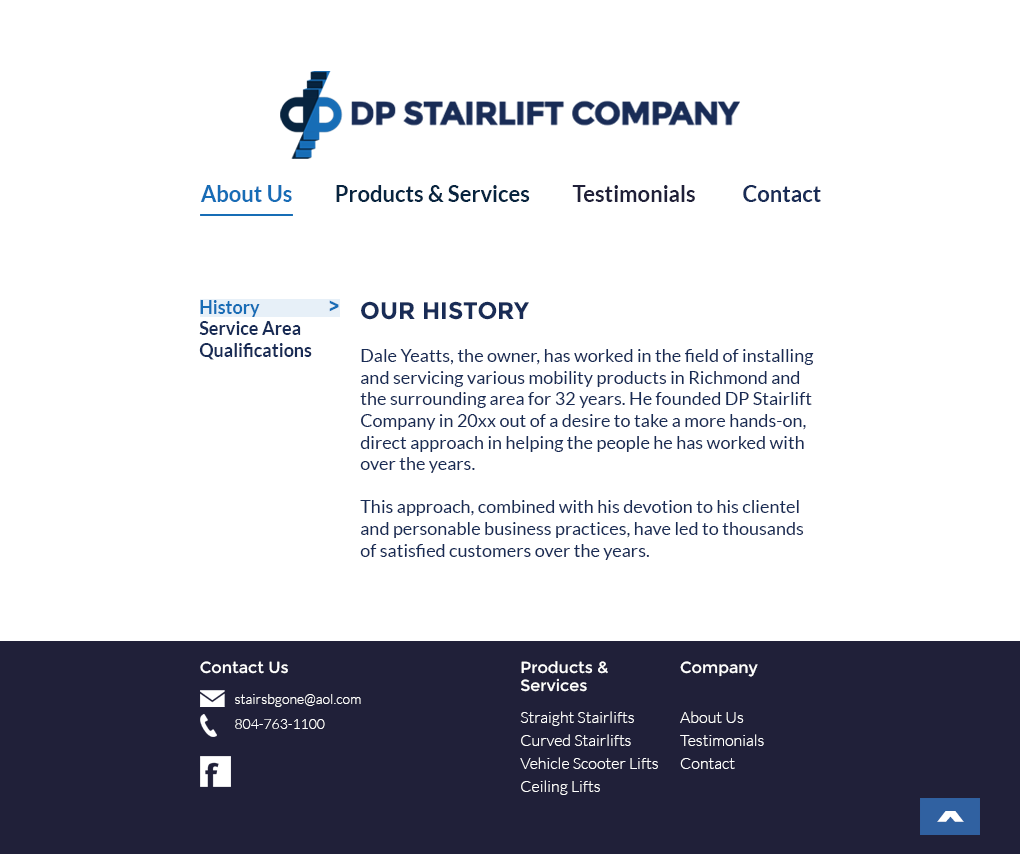
<style>
.page{position:relative;width:1020px;height:854px;background:#ffffff}
.page>*{position:absolute;margin:0}
.t1{font:22px "Lato-Bold";color:#07243f}
.t2{font:22px "Lato-Bold";color:#176db6}
.t3{font:22px "Lato-Bold";color:#202039}
.t4{font:22px "Lato-Bold";color:#192c56}
.t5{font:18px "Lato-Bold";color:#192c56}
.t6{font:18px "Lato-Bold";color:#176db6}
.t7{font:18px "Montserrat-Bold";color:#176db6}
.t8{font:18px "Lato-Regular";color:#192c56}
.t9{font:24px "Montserrat-Bold";color:#192c56}
.t10{font:16px "Montserrat-Regular";color:#ffffff}
.t11{font:16px/23px "Lato-Light";color:#ffffff}
.t12{font:16px/20px "Montserrat-Regular";color:#ffffff}
.t13{font:16px/18px "Montserrat-Regular";color:#ffffff}
.t14{font:16px/16px "Lato-Light";color:#ffffff}
.t15{font:16px/16px "Montserrat-Regular";color:#ffffff}
.t16{font:16px/34px "Lato-Light";color:#ffffff}
.t17{font:14px/6px "Lato-Light";color:#ffffff}
.t18{font:14px/25px "Lato-Light";color:#ffffff}
.t19{font:60px "Montserrat-Bold";color:#ffffff}
</style>
<div class="page">
<p class="t1" style="left:200px;top:185px;width:621px;height:17px"><span class="t2">About Us          </span>Products &amp; Services          <span class="t3">Testimonials</span><span class="t4">           Contact</span></p>
<p class="t5" style="left:199px;top:300px;width:113px;height:60px"><span class="t6">History<br></span>Service Area<br>Qualifications</p>
<p class="t7" style="left:329px;top:300px;width:10px;height:12px">&gt;</p>
<p class="t8" style="left:360px;top:301px;width:454px;height:259px"><span class="t9">OUR HISTORY<br></span><br>Dale Yeatts, the owner, has worked in the field of installing and servicing various mobility products in Richmond and the surrounding area for 32 years. He founded DP Stairlift Company in 20xx out of a desire to take a more hands-on, direct approach in helping the people he has worked with over the years. <br><br>This approach, combined with his devotion to his clientel and personable business practices, have led to thousands of satisfied customers over the years.</p>
<p class="t10" style="left:200px;top:661px;width:88px;height:13px">Contact Us</p>
<p class="t11" style="left:520px;top:661px;width:138px;height:134px"><span class="t12">Products &amp; <br></span><span class="t13">Services<br><br></span><span class="t14">Straight Stairlifts<br></span>Curved Stairlifts<br>Vehicle Scooter Lifts<br>Ceiling Lifts</p>
<p class="t11" style="left:680px;top:661px;width:84px;height:108px"><span class="t15">Company<br><br></span><span class="t16">About Us <br></span>Testimonials<br>Contact</p>
<p class="t17" style="left:235px;top:694px;width:126px;height:35px">stairsbgone@aol.com<br><span class="t18">804-763-1100</span></p>
<p class="t19" style="left:937px;top:811px;width:27px;height:11px">^</p>
</div>
